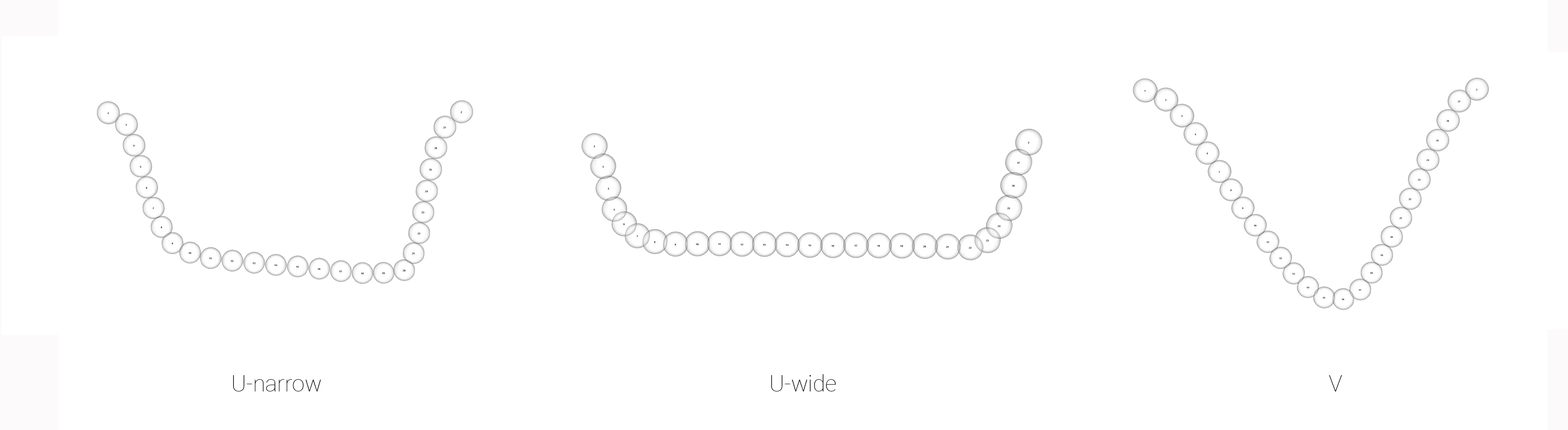
<style>
.page{position:relative;width:1568px;height:430px;background:#ffffff}
.page>*{position:absolute;margin:0}
.t1{font:22.7px "Roboto-Thin";color:#020202}
</style>
<div class="page">
<p class="t1" style="left:233px;top:376px;width:88px;height:16px">U-narrow</p>
<p class="t1" style="left:771px;top:375px;width:65px;height:17px">U-wide</p>
<p class="t1" style="left:1329px;top:376px;width:13px;height:16px">V</p>
</div>
